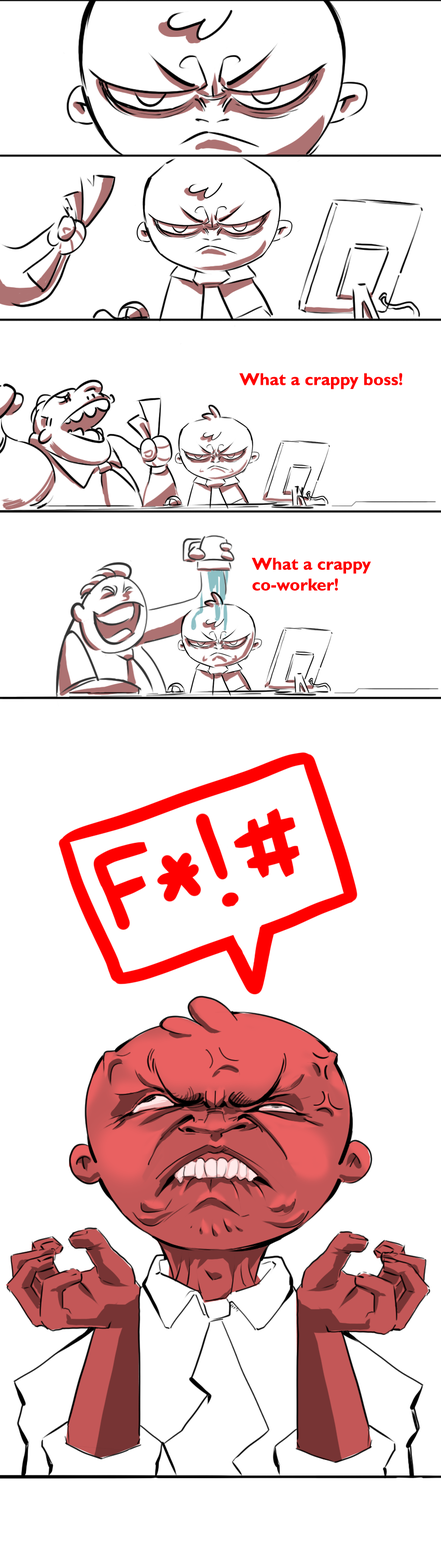
<style>
.page{position:relative;width:441px;height:1568px;background:#ffffff}
.page>*{position:absolute;margin:0}
.t1{font:17.3px "GillSansMT-Bold";color:#ff0000}
</style>
<div class="page">
<p class="t1" style="left:239px;top:373px;width:164px;height:17px">What a crappy boss!</p>
<p class="t1" style="left:252px;top:558px;width:119px;height:33px">What a crappy <br>co-worker!</p>
</div>
